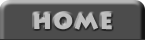
<style>
.page{position:relative;width:145px;height:40px;background:#4c4c4c}
.page>*{position:absolute;margin:0}
.t1{font:22px "Lithograph-Bold";letter-spacing:0.05em;color:#bebebe}
</style>
<div class="page">
<p class="t1" style="left:34px;top:13px;width:78px;height:17px">Home</p>
</div>
